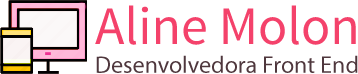
<style>
.page{position:relative;width:358px;height:74px;background:#ffffff}
.page>*{position:absolute;margin:0}
.t1{font:24px "MyriadPro-Regular";color:#4f373d}
.t2{font:54px "SourceSansPro-Regular";color:#f4426b}
</style>
<div class="page">
<p class="t1" style="left:95px;top:5px;width:263px;height:68px"><span class="t2">Aline Molon <br></span>Desenvolvedora Front End</p>
</div>
